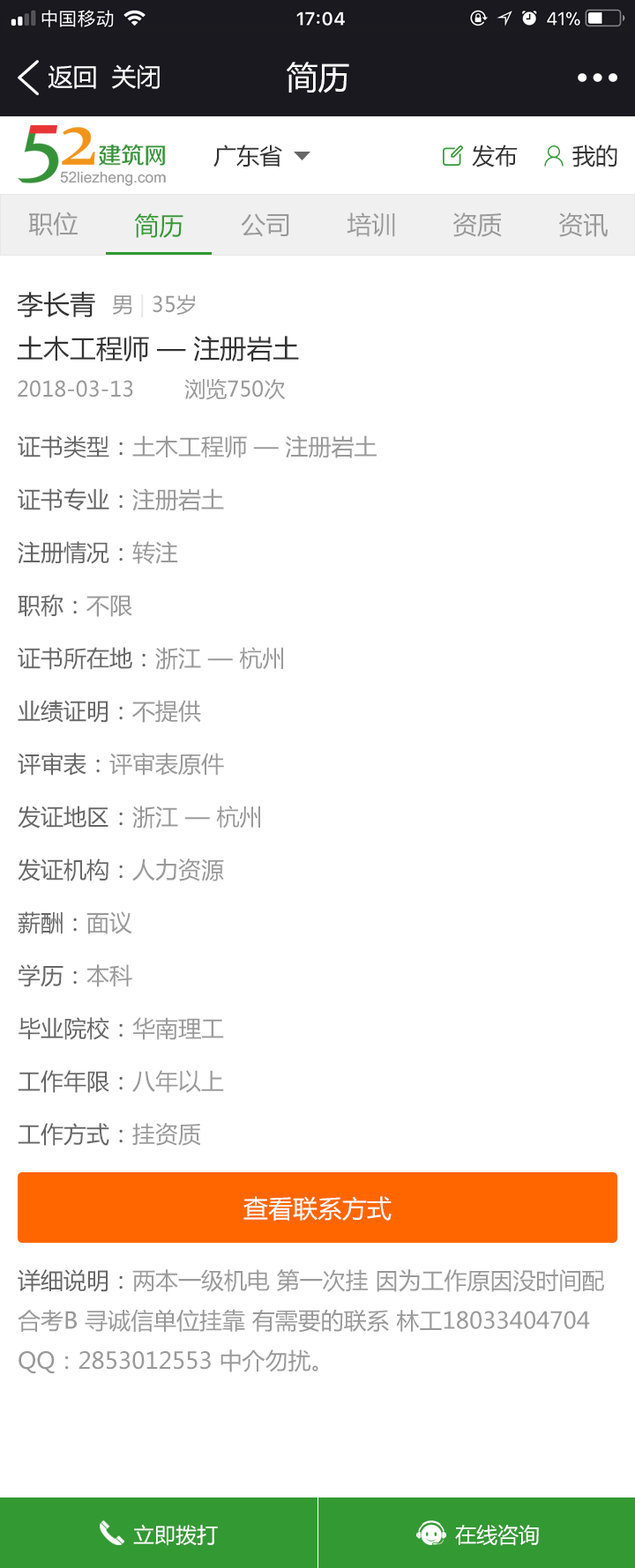
<style>
.page{position:relative;width:635px;height:1568px;background:#ffffff}
.page>*{position:absolute;margin:0}
.t1{font:24.7px "MicrosoftYaHei";color:#ffffff}
.t2{font:31.7px "MicrosoftYaHei";color:#ffffff}
.t3{font:22.9px "MicrosoftYaHei";color:#333333}
.t4{font:24.7px "MicrosoftYaHei";color:#999999}
.t5{font:24.7px "MicrosoftYaHei";color:#339933}
.t6{font:26.4px "MicrosoftYaHei";color:#333333}
.t7{font:21.2px "MicrosoftYaHei";color:#999999}
.t8{font:21.2px "MicrosoftYaHei";color:#e7e7e7}
.t9{font:22.9px/52.9px "MicrosoftYaHei";color:#999999}
.t10{font:22.9px/52.9px "MicrosoftYaHei";color:#666666}
.t11{font:22.9px "MicrosoftYaHei";color:#999999}
.t12{font:22.9px "MicrosoftYaHei";color:#666666}
.t13{font:21.2px "MicrosoftYaHei";color:#ffffff}
</style>
<div class="page">
<p class="t1" style="left:48px;top:65px;width:48px;height:24px">返回</p>
<p class="t1" style="left:112px;top:64px;width:48px;height:25px">关闭</p>
<p class="t2" style="left:286px;top:62px;width:63px;height:31px">简历</p>
<p class="t3" style="left:213px;top:145px;width:69px;height:22px">广东省</p>
<p class="t3" style="left:472px;top:145px;width:45px;height:22px">发布</p>
<p class="t3" style="left:572px;top:145px;width:45px;height:22px">我的</p>
<p class="t4" style="left:28px;top:212px;width:50px;height:24px">职位</p>
<p class="t5" style="left:134px;top:213px;width:49px;height:25px">简历</p>
<p class="t4" style="left:241px;top:213px;width:48px;height:24px">公司</p>
<p class="t4" style="left:346px;top:212px;width:49px;height:25px">培训</p>
<p class="t4" style="left:452px;top:212px;width:50px;height:25px">资质</p>
<p class="t4" style="left:558px;top:212px;width:49px;height:25px">资讯</p>
<p class="t6" style="left:17px;top:292px;width:78px;height:25px">李长青</p>
<p class="t7" style="left:112px;top:294px;width:83px;height:24px">男 <span class="t8">|</span> 35岁</p>
<p class="t6" style="left:17px;top:336px;width:282px;height:26px">土木工程师 — 注册岩土</p>
<p class="t7" style="left:18px;top:379px;width:268px;height:21px">2018-03-13        浏览750次</p>
<p class="t9" style="left:18px;top:435px;width:358px;height:711px"><span class="t10">证书类型：</span>土木工程师 — 注册岩土<br><span class="t10">证书专业：</span>注册岩土<br><span class="t10">注册情况：</span>转注<br><span class="t10">职称：</span>不限<br><span class="t10">证书所在地：</span>浙江 — 杭州<br><span class="t10">业绩证明：</span>不提供<br><span class="t10">评审表：</span>评审表原件<br><span class="t10">发证地区：</span>浙江 — 杭州<br><span class="t10">发证机构：</span>人力资源<br><span class="t10">薪酬：</span>面议<br><span class="t10">学历：</span>本科<br><span class="t10">毕业院校：</span>华南理工<br><span class="t10">工作年限：</span>八年以上<br><span class="t10">工作方式：</span>挂资质</p>
<p class="t1" style="left:243px;top:1196px;width:148px;height:25px">查看联系方式</p>
<p class="t11" style="left:18px;top:1269px;width:586px;height:105px"><span class="t12">详细说明：</span>两本一级机电 第一次挂 因为工作原因没时间配<br>合考B 寻诚信单位挂靠 有需要的联系 林工18033404704 <br>QQ：2853012553 中介勿扰。</p>
<p class="t13" style="left:133px;top:1524px;width:85px;height:22px">立即拨打</p>
<p class="t13" style="left:455px;top:1525px;width:84px;height:21px">在线咨询</p>
</div>
